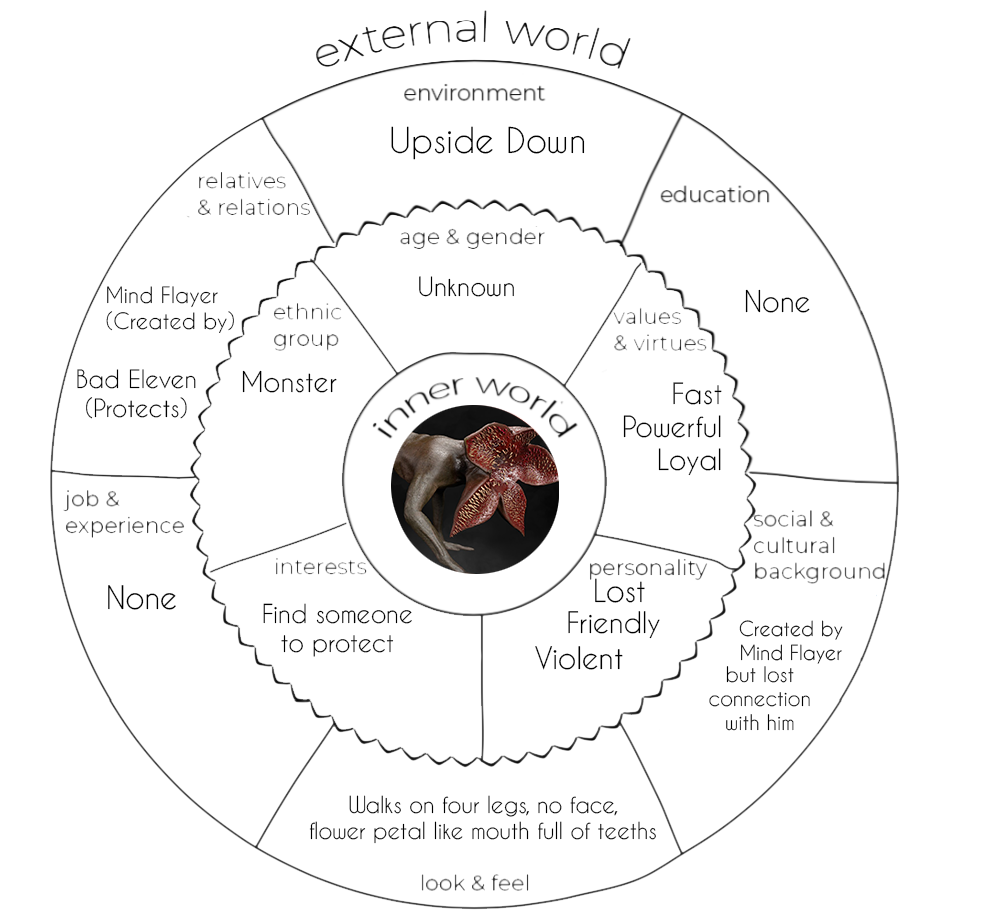
<style>
.page{position:relative;width:996px;height:920px;background:#ffffff}
.page>*{position:absolute;margin:0}
.t1{font:33.4px "CaviarDreams";color:#000000}
.t2{font:25.1px "CaviarDreams";color:#000000}
.t3{font:21.3px "CaviarDreams";color:#000000}
.t4{font:28.3px "CaviarDreams";color:#000000}
.t5{font:23.9px "CaviarDreams";color:#000000}
.t6{font:26.8px "CaviarDreams";color:#000000}
.t7{font:27.5px "CaviarDreams";color:#000000}
.t8{font:29.7px "CaviarDreams";color:#000000}
.t9{font:30.2px "CaviarDreams";color:#000000}
.t10{font:24.4px "CaviarDreams";color:#000000}
.t11{font:27.7px "CaviarDreams";color:#000000}
.t12{font:19.4px "CaviarDreams";color:#000000}
.t13{font:29.1px "CaviarDreams";color:#000000}
.t14{font:20.2px "CaviarDreams";color:#000000}
.t15{font:21.9px "CaviarDreams";color:#000000}
</style>
<div class="page">
<p class="t1" style="left:391px;top:126px;width:194px;height:34px">Upside Down</p>
<p class="t2" style="left:419px;top:276px;width:95px;height:21px">Unknown</p>
<p class="t3" style="left:106px;top:286px;width:128px;height:47px">Mind Flayer <br>(Created by)</p>
<p class="t4" style="left:745px;top:289px;width:65px;height:24px">None</p>
<p class="t5" style="left:77px;top:369px;width:119px;height:50px;text-align:center">Bad Eleven<br>(Protects)</p>
<p class="t6" style="left:242px;top:370px;width:95px;height:23px">Monster</p>
<p class="t7" style="left:623px;top:382px;width:99px;height:94px;text-align:right">Fast<br>Powerful<br>Loyal</p>
<p class="t8" style="left:595px;top:578px;width:50px;height:25px">Lost</p>
<p class="t9" style="left:108px;top:585px;width:68px;height:25px">None</p>
<p class="t10" style="left:263px;top:603px;width:149px;height:54px;text-align:center">Find someone<br>to protect</p>
<p class="t11" style="left:568px;top:611px;width:92px;height:28px">Friendly</p>
<p class="t12" style="left:739px;top:620px;width:104px;height:44px;text-align:center">Created by<br>Mind Flayer</p>
<p class="t13" style="left:535px;top:646px;width:88px;height:24px">Violent</p>
<p class="t14" style="left:709px;top:666px;width:101px;height:65px;text-align:center">but lost<br>connection <br>with him</p>
<p class="t15" style="left:309px;top:795px;width:347px;height:49px;text-align:center">Walks on four legs, no face, <br>flower petal like mouth full of teeths</p>
</div>
